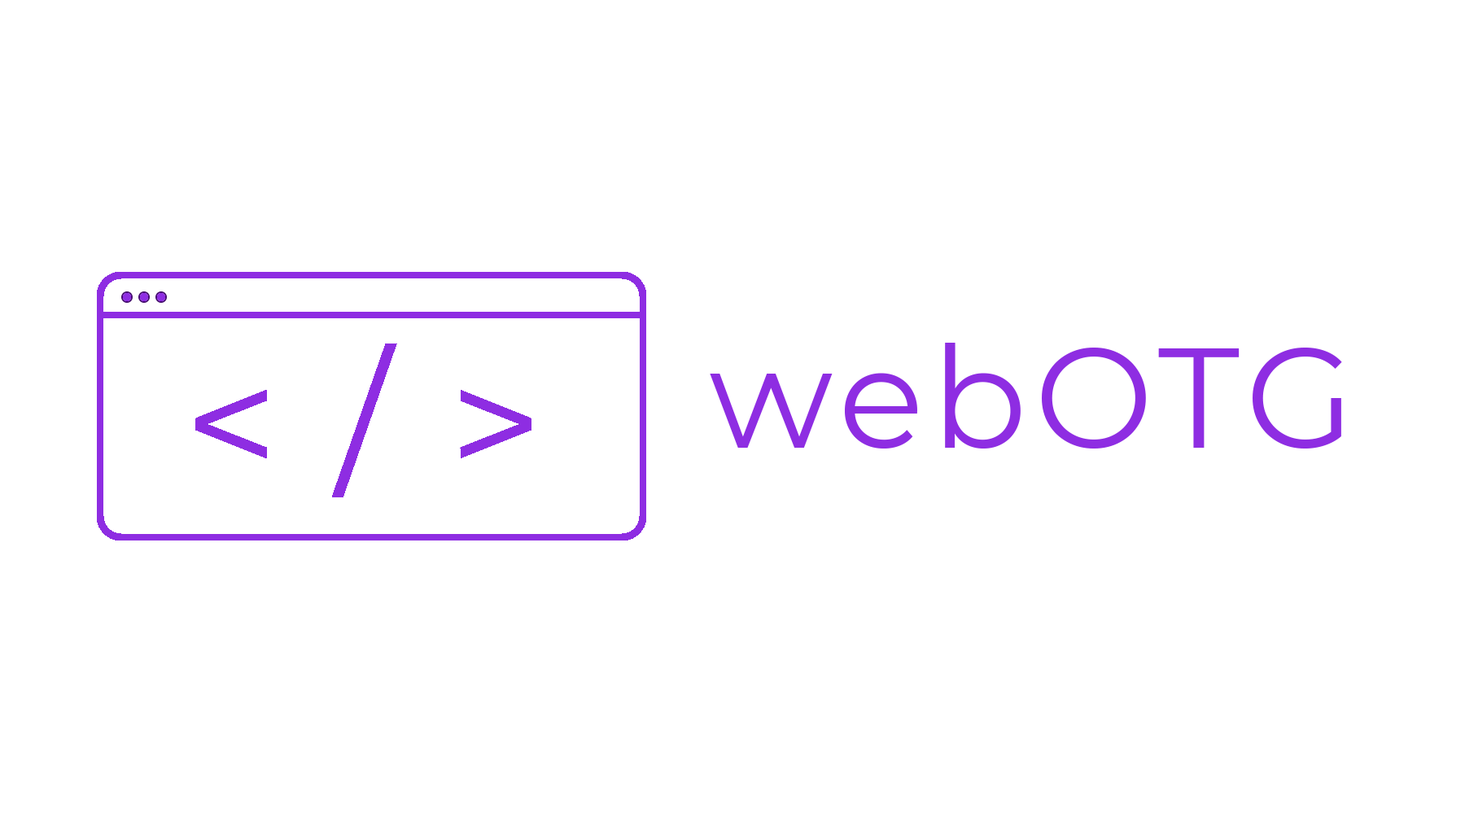
<style>
.page{position:relative;width:1465px;height:814px;background:#ffffff}
.page>*{position:absolute;margin:0}
.t1{font:141.4px "Montserrat-Regular";letter-spacing:0.05em;color:#8e2de2}
.t2{font:141.4px "Montserrat-Regular";letter-spacing:0.05em;color:#8e2de2;text-transform:uppercase}
</style>
<div class="page">
<p class="t1" style="left:710px;top:343px;width:632px;height:105px">web<span class="t2">OTG</span></p>
</div>
